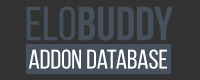
<style>
.page{position:relative;width:200px;height:80px;background:#333333}
.page>*{position:absolute;margin:0}
.t1{font:48px "BebasNeueBold";color:#46515d}
.t2{font:48px "BebasNeueRegular";color:#46515d}
.t3{font:26.6px "BebasNeueRegular";color:#ffffff}
</style>
<div class="page">
<p class="t1" style="left:26px;top:6px;width:147px;height:35px"><span class="t2">elo</span>buddy</p>
<p class="t3" style="left:29px;top:49px;width:138px;height:20px">addon database</p>
</div>
